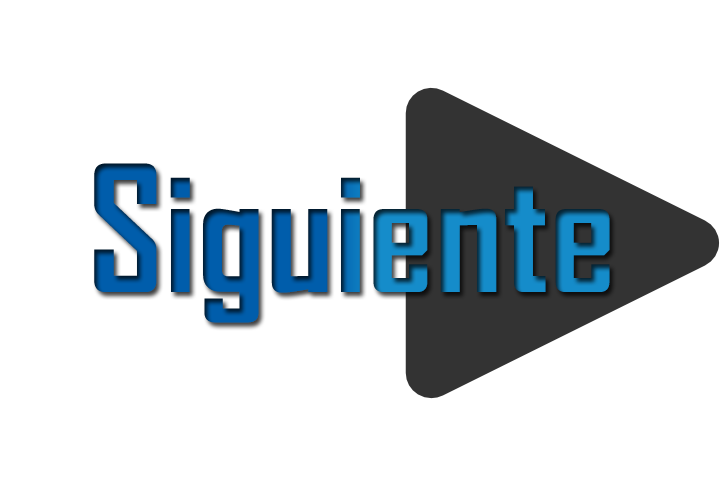
<style>
.page{position:relative;width:720px;height:480px;background:#ffffff}
.page>*{position:absolute;margin:0}
.t1{font:168px "AgencyFB-Bold"}
</style>
<div class="page">
<p class="t1" style="left:94px;top:163px;width:516px;height:160px">Siguiente</p>
</div>
